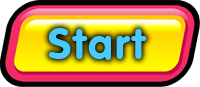
<style>
.page{position:relative;width:200px;height:87px}
.page>*{position:absolute;margin:0}
.t1{font:42.9px "VNI-Vari";letter-spacing:0.04em;color:#47caff}
</style>
<div class="page">
<p class="t1" style="left:48px;top:28px;width:99px;height:32px">Start</p>
</div>
